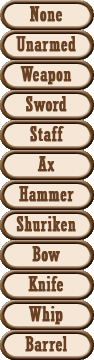
<style>
.page{position:relative;width:94px;height:360px;background:#f6e6d5}
.page>*{position:absolute;margin:0}
.t1{font:20px "Rockwell-Condensed";color:#6a4120;font-weight:bold}
</style>
<div class="page">
<p class="t1" style="left:29px;top:6px;width:34px;height:16px">None</p>
<p class="t1" style="left:16px;top:36px;width:60px;height:16px">Unarmed</p>
<p class="t1" style="left:20px;top:66px;width:52px;height:19px">Weapon</p>
<p class="t1" style="left:25px;top:96px;width:42px;height:16px">Sword</p>
<p class="t1" style="left:30px;top:126px;width:34px;height:16px">Staff</p>
<p class="t1" style="left:37px;top:156px;width:18px;height:16px">Ax</p>
<p class="t1" style="left:19px;top:186px;width:55px;height:16px">Hammer</p>
<p class="t1" style="left:16px;top:216px;width:60px;height:16px">Shuriken</p>
<p class="t1" style="left:32px;top:246px;width:28px;height:16px">Bow</p>
<p class="t1" style="left:28px;top:276px;width:36px;height:16px">Knife</p>
<p class="t1" style="left:28px;top:306px;width:35px;height:19px">Whip</p>
<p class="t1" style="left:25px;top:336px;width:42px;height:16px">Barrel</p>
</div>
